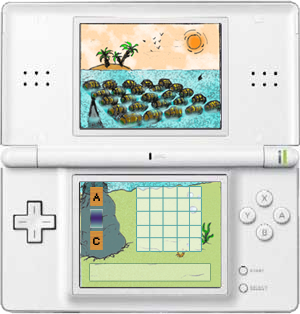
<style>
.page{position:relative;width:300px;height:314px}
.page>*{position:absolute;margin:0}
.t1{font:11px "Small Fonts";color:#000000}
</style>
<div class="page">
<p class="t1" style="left:93px;top:193px;width:7px;height:8px">A</p>
<p class="t1" style="left:93px;top:237px;width:7px;height:8px">C</p>
</div>
